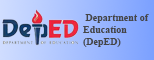
<style>
.page{position:relative;width:154px;height:60px}
.page>*{position:absolute;margin:0}
.t1{font:10px "TimesNewRomanPS-BoldMT";color:#454545}
</style>
<div class="page">
<p class="t1" style="left:83px;top:14px;width:66px;height:33px;text-align:right">Department of <br>Education<br>(DepED)</p>
</div>
